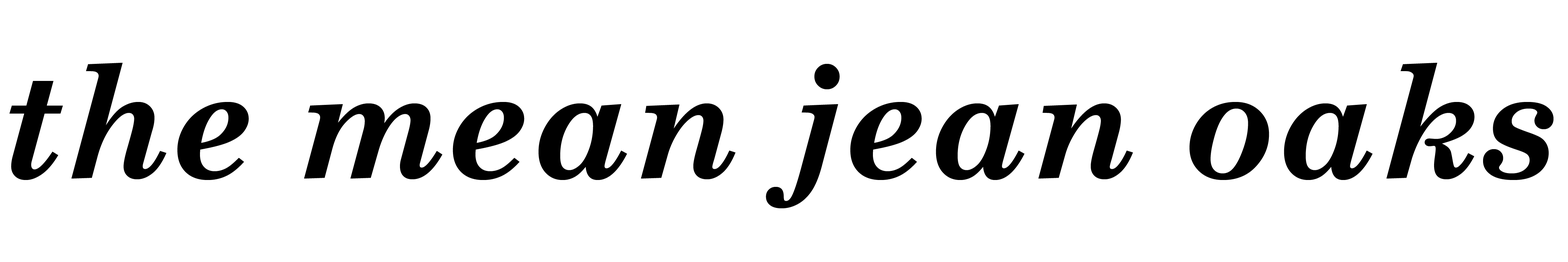
<style>
.page{position:relative;width:1568px;height:262px;background:#ffffff}
.page>*{position:absolute;margin:0}
.t1{font:157.3px "CenturySchoolbook-BoldItalic";color:#000000}
</style>
<div class="page">
<p class="t1" style="left:9px;top:63px;width:1544px;height:145px">the mean jean oaks</p>
</div>
